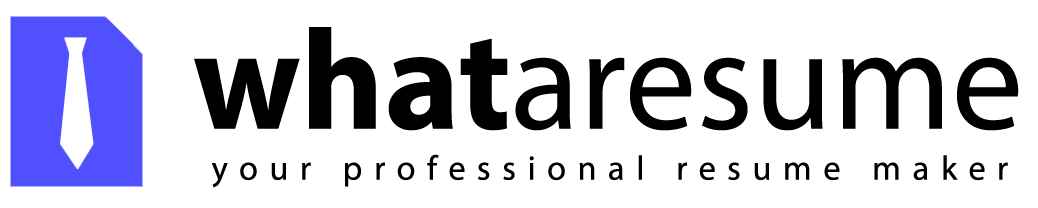
<style>
.page{position:relative;width:1038px;height:208px;background:#ffffff}
.page>*{position:absolute;margin:0}
.t1{font:200px "MyriadArabic-Regular";color:#000000}
.t2{font:200px "MyriadArabic-Bold";color:#000000}
.t3{font:48px "MyriadArabic-Regular";letter-spacing:0.238em;color:#000000}
</style>
<div class="page">
<p class="t1" style="left:194px;top:27px;width:825px;height:104px"><span class="t2">what</span>aresume</p>
<p class="t3" style="left:211px;top:154px;width:797px;height:34px">your professional resume maker</p>
</div>
